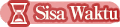
<style>
.page{position:relative;width:120px;height:27px}
.page>*{position:absolute;margin:0}
.t1{font:18px "RyuminPro-ExBold";letter-spacing:-0.08em;color:#fffff7}
</style>
<div class="page">
<p class="t1" style="left:35px;top:5px;width:83px;height:15px">Sisa Waktu</p>
</div>
